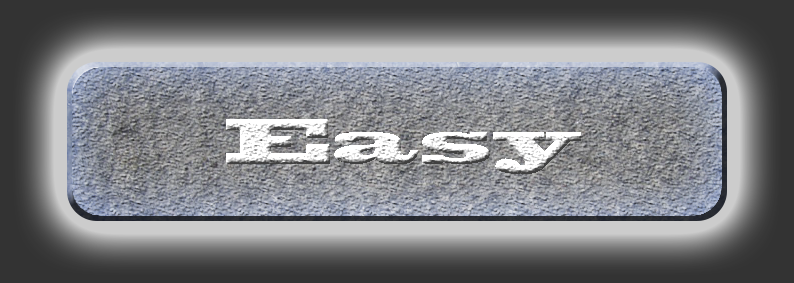
<style>
.page{position:relative;width:794px;height:283px}
.page>*{position:absolute;margin:0}
.t1{font:60px "BlackoakStd"}
</style>
<div class="page">
<p class="t1" style="left:226px;top:119px;width:355px;height:55px">Easy</p>
</div>
